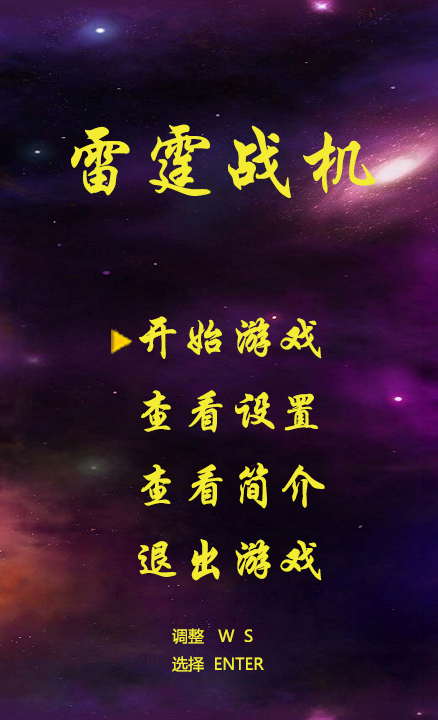
<style>
.page{position:relative;width:438px;height:720px}
.page>*{position:absolute;margin:0}
.t1{font:80px "STXingkai";color:#f3ec32}
.t2{font:48px "STXingkai";color:#f3ec32}
.t3{font:16px "MicrosoftYaHei";color:#f3ec32}
</style>
<div class="page">
<p class="t1" style="left:71px;top:124px;width:305px;height:74px">雷霆战机</p>
<p class="t2" style="left:139px;top:316px;width:183px;height:43px">开始游戏</p>
<p class="t2" style="left:141px;top:390px;width:178px;height:43px">查看设置</p>
<p class="t2" style="left:141px;top:462px;width:184px;height:47px">查看简介</p>
<p class="t2" style="left:138px;top:538px;width:184px;height:43px">退出游戏</p>
<p class="t3" style="left:172px;top:628px;width:92px;height:44px">调整   W  S <br>选择  ENTER</p>
</div>
